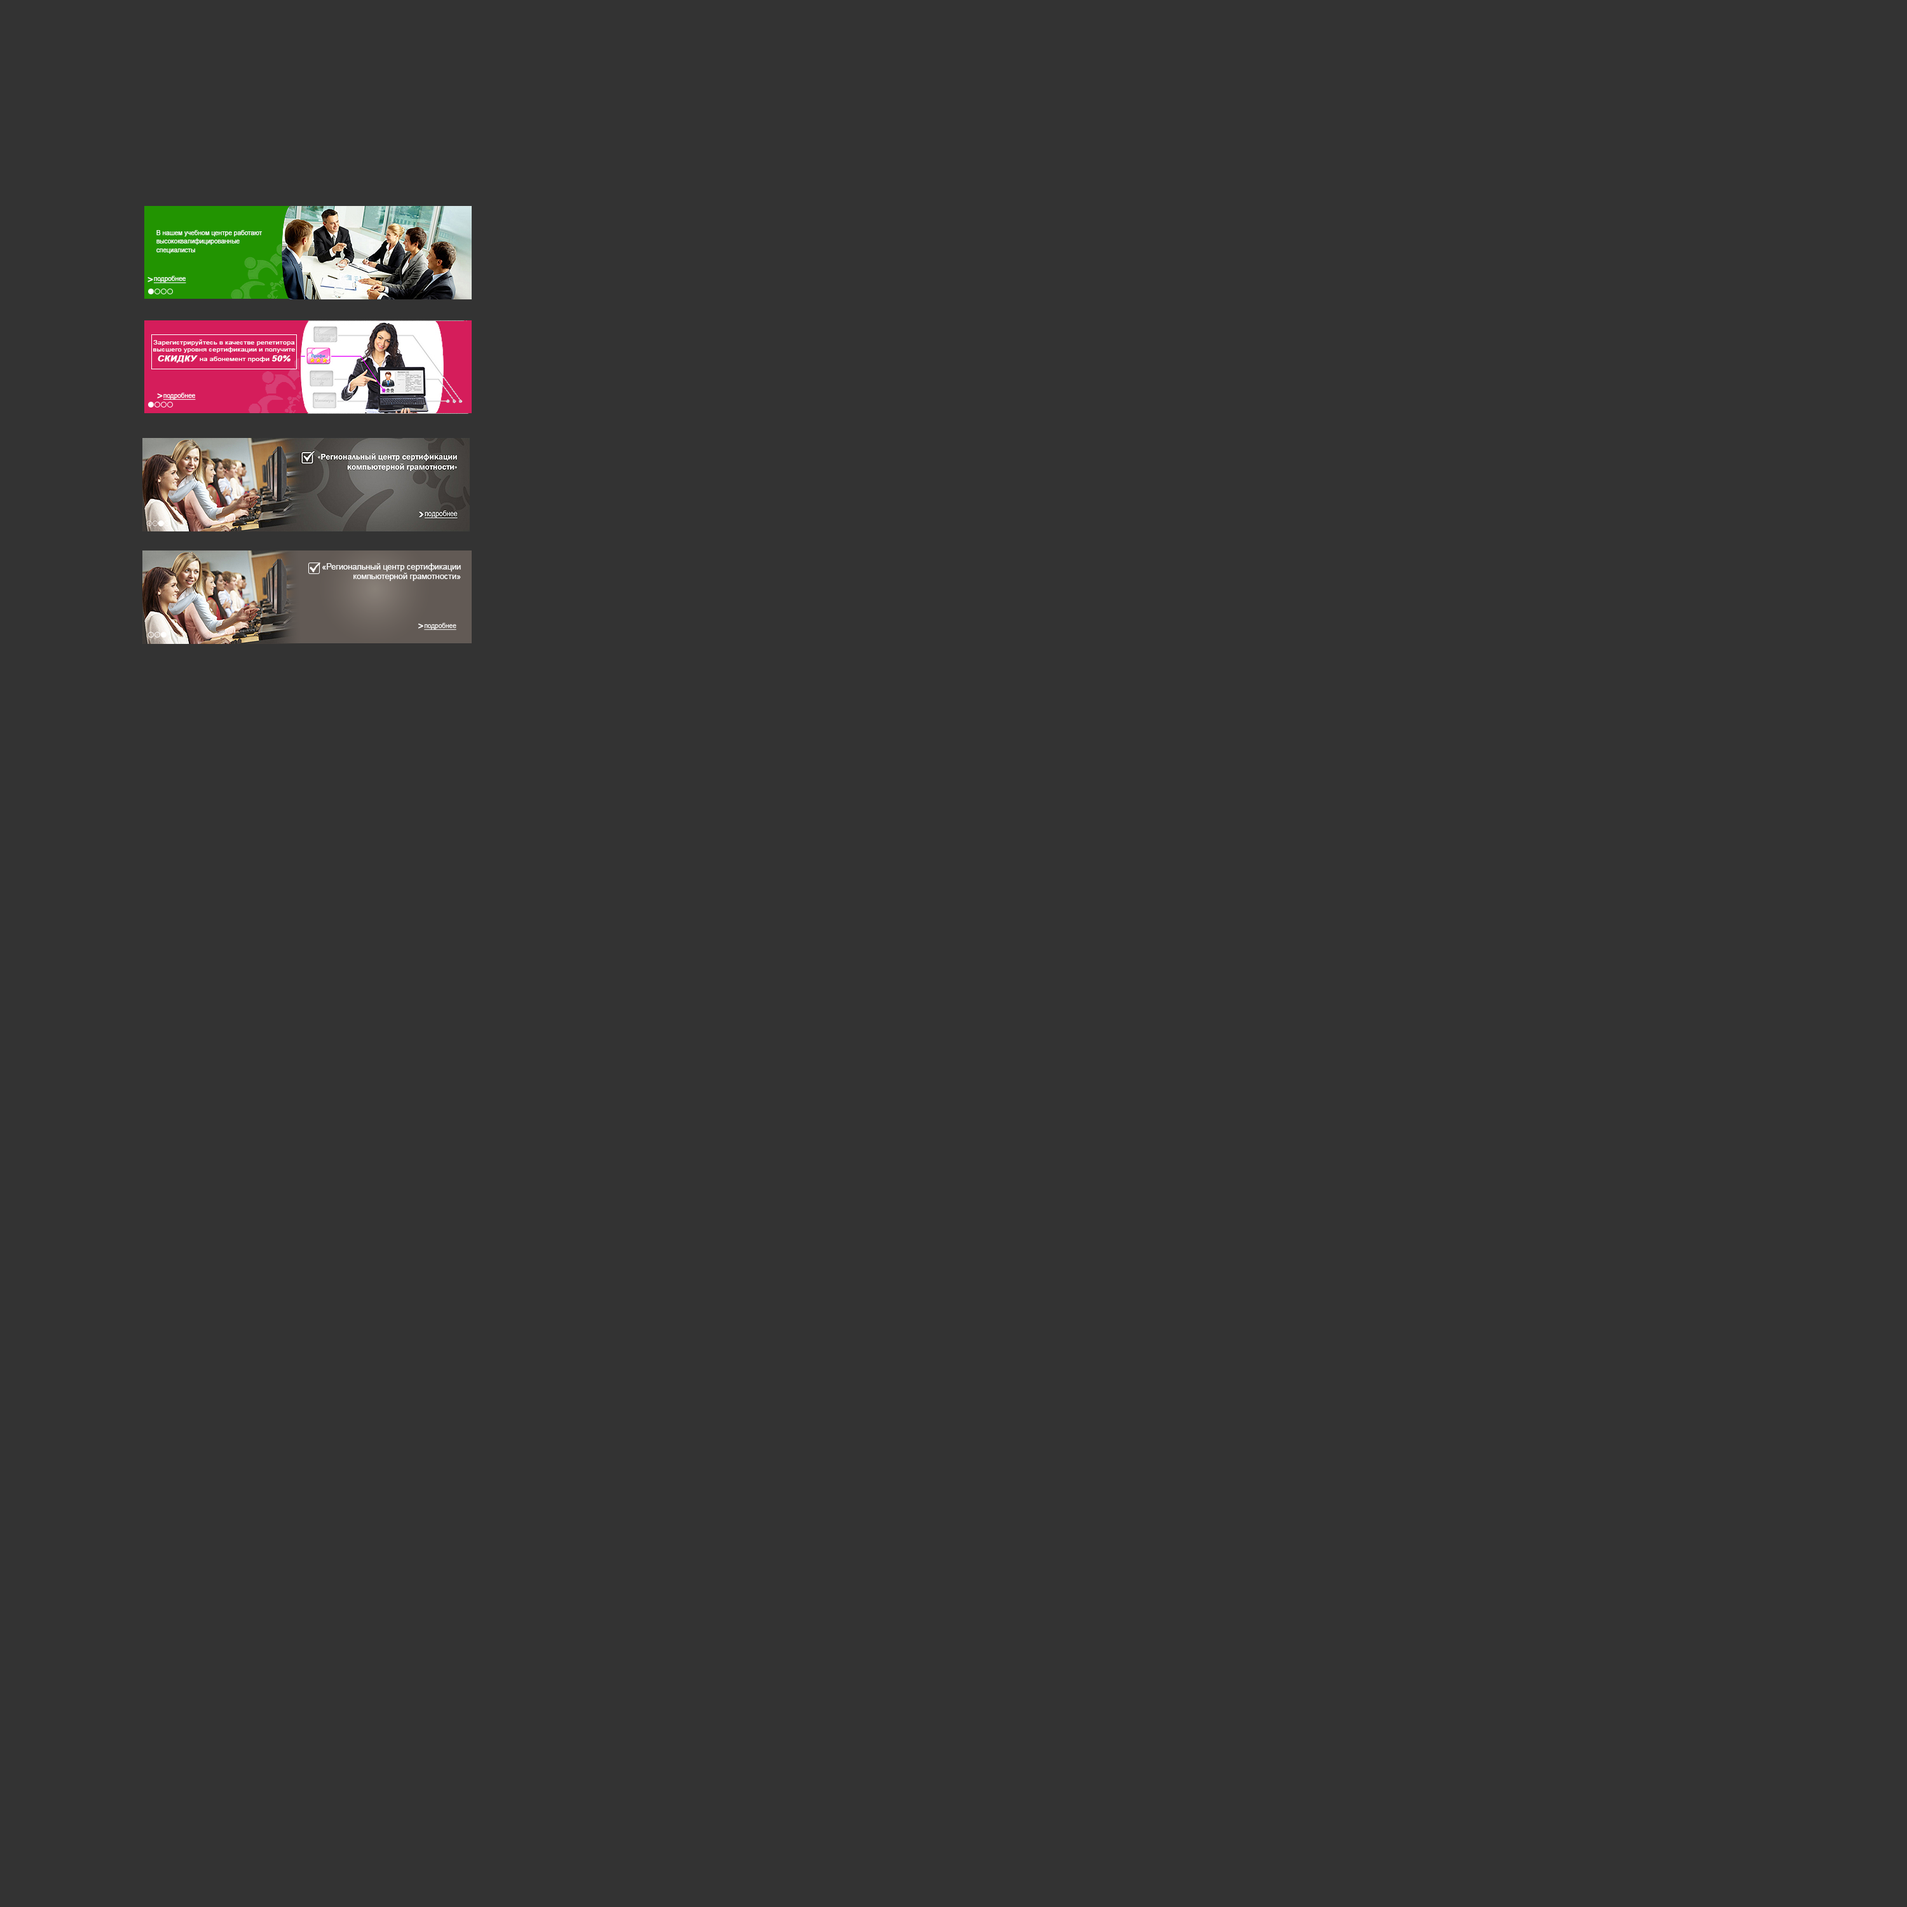
<style>
.page{position:relative;width:1907px;height:1907px;background:#333333}
.page>*{position:absolute;margin:0}
.t1{font:7.2px "ArialMT";letter-spacing:0.01em;color:#fefefe;scale:0.87 1}
.t2{font:9.9px "ArialMT";letter-spacing:0.01em;color:#fefefe;font-weight:bold;scale:0.94 1}
.t3{font:7.2px "ArialMT";letter-spacing:0.01em;color:#fefefe;text-decoration:underline;scale:0.87 1}
.t4{font:5.9px "ArialMT";letter-spacing:0.01em;color:#fefefe;scale:1.2 1}
.t5{font:7.7px "Arial-BoldItalicMT";letter-spacing:0.01em;color:#fefefe;font-weight:bold;scale:1.2 1}
.t6{font:7.9px "ArialMT";letter-spacing:0.01em;color:#fefefe}
</style>
<div class="page">
<p class="t1" style="left:156px;top:230px;width:106px;height:24px">В нашем учебном центре работают<br>высококвалифицированные<br>специалисты</p>
<p class="t2" style="left:148px;top:277px;width:5px;height:5px">&gt;</p>
<p class="t3" style="left:153px;top:276px;width:33px;height:8px">подробнее</p>
<p class="t4" style="left:153px;top:340px;width:142px;height:23px;text-align:center">Зарегистрируйтесь в качестве репетитора<br>высшего уровня сертификации и получите<br><span class="t5">СКИДКУ </span>на абонемент профи <span class="t5">50%</span></p>
<p class="t2" style="left:157px;top:394px;width:6px;height:5px">&gt;</p>
<p class="t3" style="left:163px;top:393px;width:33px;height:7px">подробнее</p>
<p class="t6" style="left:322px;top:563px;width:139px;height:18px;text-align:right">«Региональный центр сертификации компьютерной грамотности»</p>
<p class="t2" style="left:418px;top:624px;width:5px;height:5px">&gt;</p>
</div>
